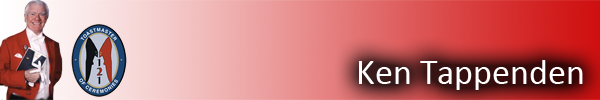
<style>
.page{position:relative;width:600px;height:100px}
.page>*{position:absolute;margin:0}
.t1{font:36px "Calibri";color:#ffffff}
</style>
<div class="page">
<p class="t1" style="left:359px;top:60px;width:224px;height:30px">Ken Tappenden</p>
</div>
